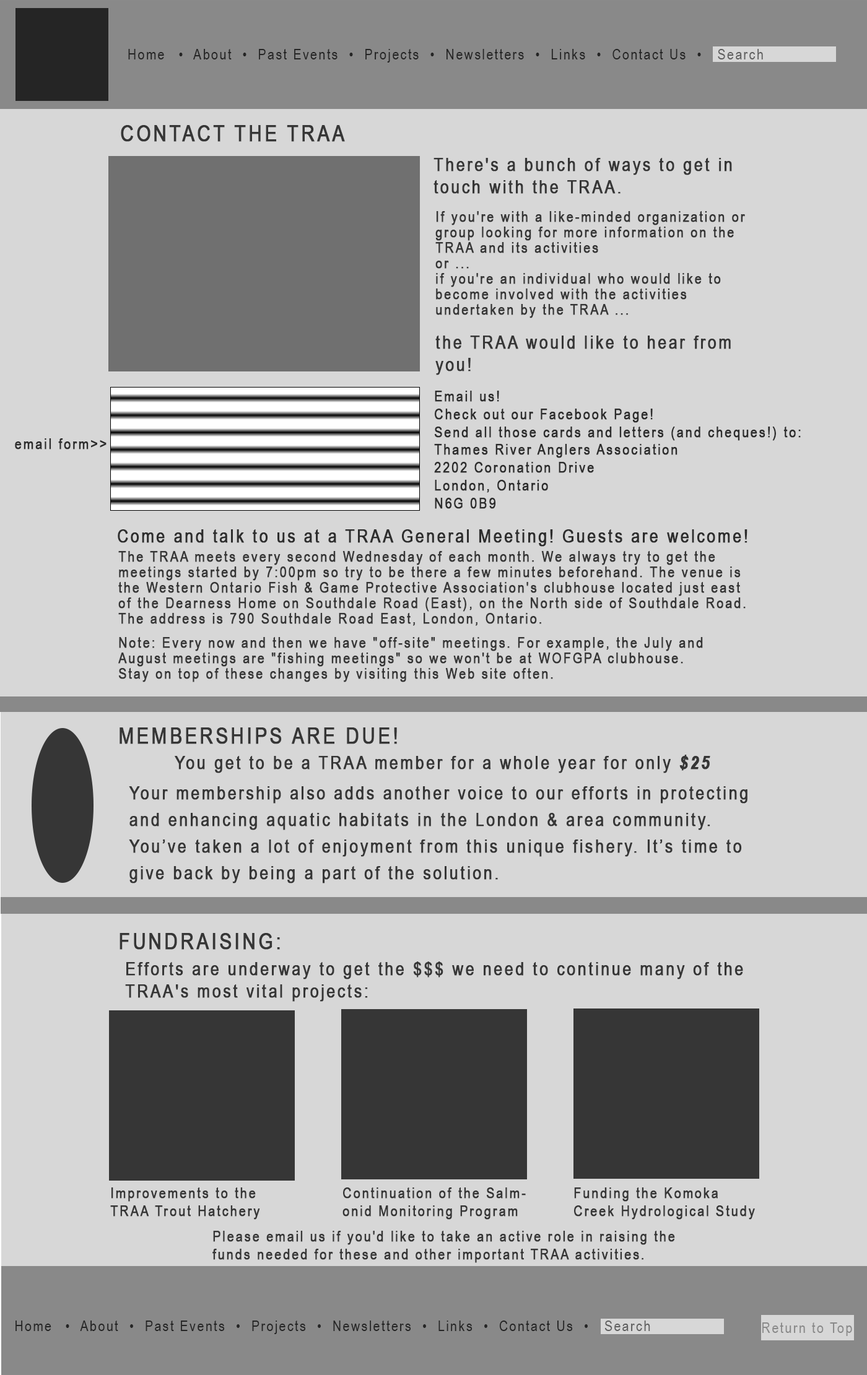
<style>
.page{position:relative;width:867px;height:1375px;background:#d7d7d7}
.page>*{position:absolute;margin:0}
.t1{font:14.9px "ArialNarrow";letter-spacing:0.1em;color:#252525}
.t2{font:14.9px "ArialNarrow";letter-spacing:0.1em;color:#5f5f5f}
.t3{font:22.3px "ArialNarrow";letter-spacing:0.1em;color:#363636;font-weight:bold}
.t4{font:18.6px "ArialNarrow";letter-spacing:0.1em;color:#363636;font-weight:bold}
.t5{font:14.9px/15.5px "ArialNarrow";letter-spacing:0.1em;color:#363636;font-weight:bold}
.t6{font:14.9px "ArialNarrow";letter-spacing:0.1em;color:#2d2d2d;font-weight:bold}
.t7{font:18.6px "ArialNarrow";letter-spacing:0.1em;color:#2d2d2d;font-weight:bold}
.t8{font:18.6px "ArialNarrow-BoldItalic";letter-spacing:0.1em;color:#363636;font-weight:bold}
.t9{font:18.6px/26.6px "ArialNarrow";letter-spacing:0.1em;color:#363636;font-weight:bold}
.t10{font:14.9px "ArialNarrow";letter-spacing:0.1em;color:#363636;font-weight:bold}
.t11{font:14.9px "ArialNarrow";letter-spacing:0.1em;color:#898989}
.t12{font:9.9px "ArialNarrow";letter-spacing:0.1em;color:#898989}
</style>
<div class="page">
<p class="t1" style="left:128px;top:49px;width:635px;height:14px">Home  •  About  •  Past Events  •  Projects  •  Newsletters  •  Links  •  Contact Us  •   <span class="t2">Search</span></p>
<p class="t3" style="left:121px;top:125px;width:224px;height:17px">CONTACT THE TRAA</p>
<p class="t4" style="left:433px;top:158px;width:299px;height:36px">There's a bunch of ways to get in <br>touch with the TRAA.</p>
<p class="t5" style="left:435px;top:211px;width:310px;height:107px">If you're with a like-minded organization or <br>group looking for more information on the <br>TRAA and its activities <br>or ...<br>if you're an individual who would like to <br>become involved with the activities <br>undertaken by the TRAA ...</p>
<p class="t4" style="left:435px;top:336px;width:296px;height:39px">the TRAA would like to hear from <br>you!</p>
<p class="t6" style="left:434px;top:391px;width:367px;height:118px">Email us!<br>Check out our Facebook Page!<br>Send all those cards and letters (and cheques!) to:<br>Thames River Anglers Association<br>2202 Coronation Drive<br>London, Ontario<br>N6G 0B9</p>
<p class="t6" style="left:15px;top:438px;width:92px;height:12px">email form&gt;&gt;</p>
<p class="t7" style="left:118px;top:529px;width:629px;height:18px">Come and talk to us at a TRAA General Meeting! Guests are welcome!</p>
<p class="t5" style="left:118px;top:551px;width:628px;height:75px">The TRAA meets every second Wednesday of each month. We always try to get the <br>meetings started by 7:00pm so try to be there a few minutes beforehand. The venue is<br>the Western Ontario Fish &amp; Game Protective Association's clubhouse located just east <br>of the Dearness Home on Southdale Road (East), on the North side of Southdale Road.<br>The address is 790 Southdale Road East, London, Ontario.</p>
<p class="t5" style="left:118px;top:637px;width:585px;height:45px">Note: Every now and then we have "off-site" meetings. For example, the July and <br>August meetings are "fishing meetings" so we won't be at WOFGPA clubhouse. <br>Stay on top of these changes by visiting this Web site often.</p>
<p class="t3" style="left:120px;top:728px;width:277px;height:16px">MEMBERSHIPS ARE DUE!</p>
<p class="t4" style="left:175px;top:755px;width:535px;height:18px">You get to be a TRAA member for a whole year for only <span class="t8">$25</span></p>
<p class="t9" style="left:129px;top:786px;width:618px;height:98px">Your membership also adds another voice to our efforts in protecting <br>and enhancing aquatic habitats in the London &amp; area community.<br>You’ve taken a lot of enjoyment from this unique fishery. It’s time to<br>give back by being a part of the solution.</p>
<p class="t3" style="left:120px;top:933px;width:160px;height:17px">FUNDRAISING:</p>
<p class="t4" style="left:125px;top:962px;width:618px;height:40px">Efforts are underway to get the $$$ we need to continue many of the<br>TRAA's most vital projects:</p>
<p class="t10" style="left:110px;top:1188px;width:150px;height:32px">Improvements to the<br>TRAA Trout Hatchery</p>
<p class="t10" style="left:342px;top:1188px;width:184px;height:32px">Continuation of the Salm-<br>onid Monitoring Program</p>
<p class="t10" style="left:574px;top:1188px;width:181px;height:32px">Funding the Komoka<br>Creek Hydrological Study</p>
<p class="t10" style="left:212px;top:1231px;width:463px;height:32px">Please email us if you'd like to take an active role in raising the <br>funds needed for these and other important TRAA activities.</p>
<p class="t1" style="left:15px;top:1321px;width:635px;height:14px">Home  •  About  •  Past Events  •  Projects  •  Newsletters  •  Links  •  Contact Us  •   <span class="t2">Search</span></p>
<p class="t11" style="left:762px;top:1323px;width:90px;height:13px"><span class="t12"><br></span>Return to Top</p>
</div>
